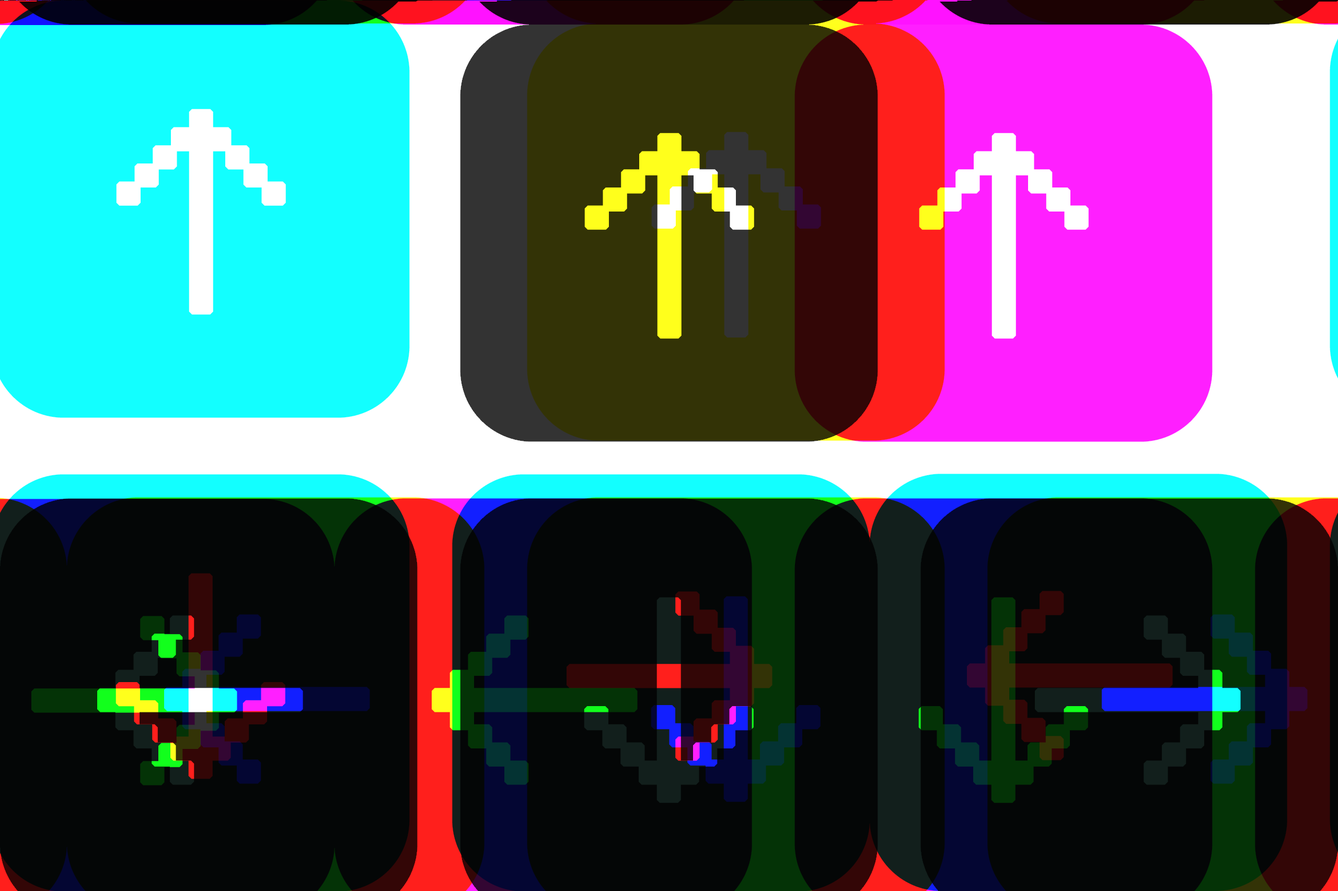
<style>
.page{position:relative;width:1338px;height:891px;background:#040606}
.page>*{position:absolute;margin:0}
.t1{font:217.7px "Cubic_11";letter-spacing:0.1em;font-weight:bold}
</style>
<div class="page">
<p class="t1" style="left:584px;top:108px;width:170px;height:207px">↑</p>
<p class="t1" style="left:1035px;top:591px;width:205px;height:170px">→</p>
</div>
